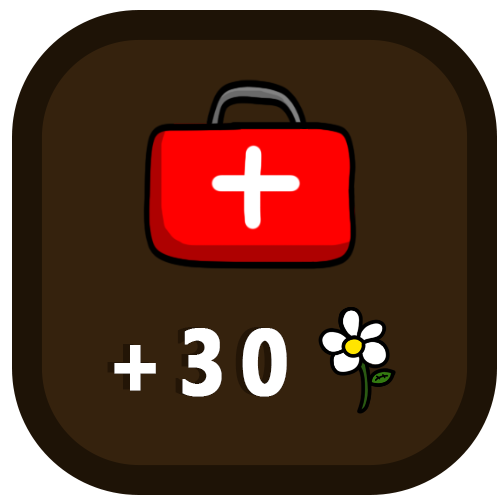
<style>
.page{position:relative;width:500px;height:500px;background:#35220d}
.page>*{position:absolute;margin:0}
.t1{font:93.4px "Gadugi-Bold";letter-spacing:0.156em;font-weight:bold;scale:0.88 1}
.t2{font:93.4px "Gadugi-Bold";letter-spacing:0.156em;color:#ffffff;font-weight:bold;scale:0.88 1}
</style>
<div class="page">
<p class="t1" style="left:107px;top:327px;width:173px;height:69px">+30</p>
<p class="t2" style="left:114px;top:328px;width:173px;height:69px">+30</p>
</div>
